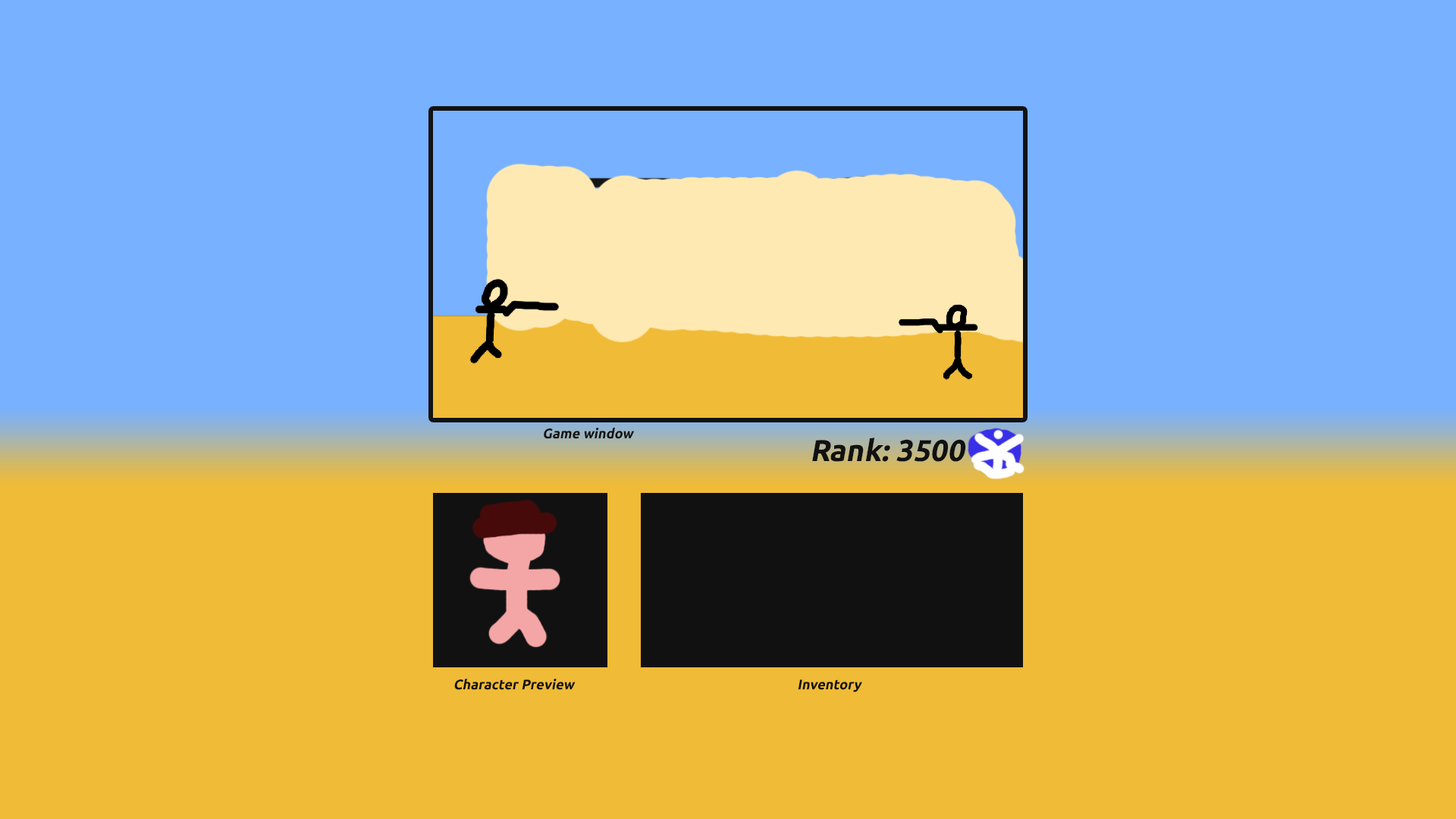
<style>
.page{position:relative;width:1456px;height:819px;background:#77b1ff}
.page>*{position:absolute;margin:0}
.t1{font:13.8px "Ubuntu-Bold";color:#111111;font-style:italic}
.t2{font:30.1px "Ubuntu-Bold";color:#111111;font-style:italic}
</style>
<div class="page">
<p class="t1" style="left:544px;top:427px;width:91px;height:12px">Game window</p>
<p class="t2" style="left:812px;top:438px;width:154px;height:24px">Rank: 3500</p>
<p class="t1" style="left:454px;top:678px;width:122px;height:12px">Character Preview</p>
<p class="t1" style="left:798px;top:679px;width:64px;height:13px">Inventory</p>
</div>
